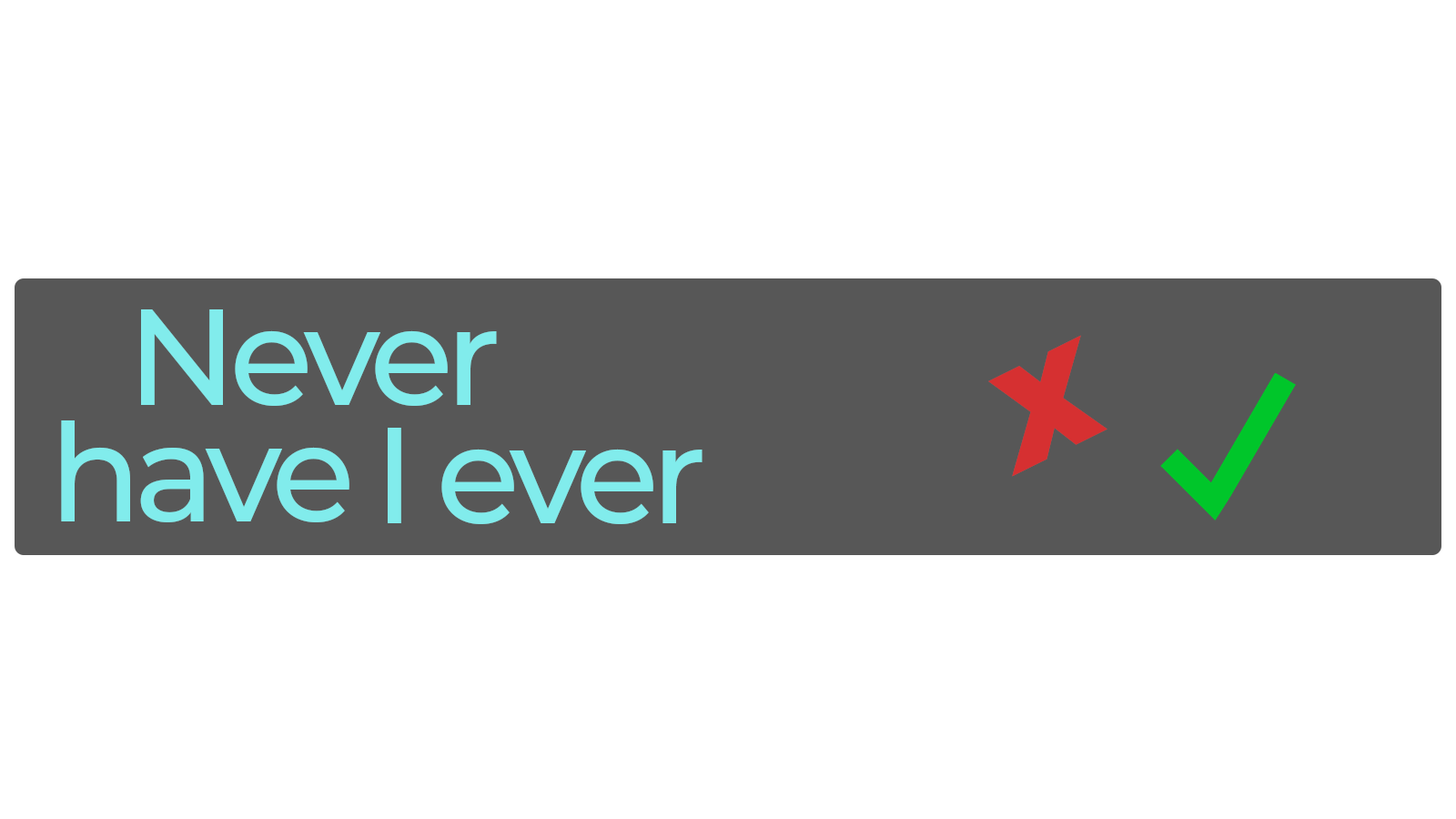
<style>
.page{position:relative;width:1456px;height:819px;background:#ffffff}
.page>*{position:absolute;margin:0}
.t1{font:136.5px "Montserrat-Medium";letter-spacing:-0.06em;color:#81ecec}
.t2{font:136.5px "Montserrat-BlackItalic";letter-spacing:-0.06em;color:#d63031}
</style>
<div class="page">
<p class="t1" style="left:141px;top:309px;width:356px;height:97px">Never</p>
<p class="t2" style="left:988px;top:335px;width:119px;height:142px;rotate:-26deg">X</p>
<p class="t1" style="left:61px;top:420px;width:288px;height:102px">have</p>
<p class="t1" style="left:388px;top:428px;width:315px;height:96px">I ever</p>
</div>
